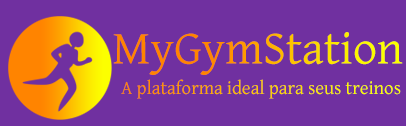
<style>
.page{position:relative;width:406px;height:126px;background:#7030a0}
.page>*{position:absolute;margin:0}
.t1{font:47.4px "GentiumBasic"}
.t2{font:19px "GentiumBasic"}
</style>
<div class="page">
<p class="t1" style="left:113px;top:32px;width:290px;height:43px">MyGymStation</p>
<p class="t2" style="left:121px;top:79px;width:280px;height:20px">A plataforma ideal para seus treinos</p>
</div>
